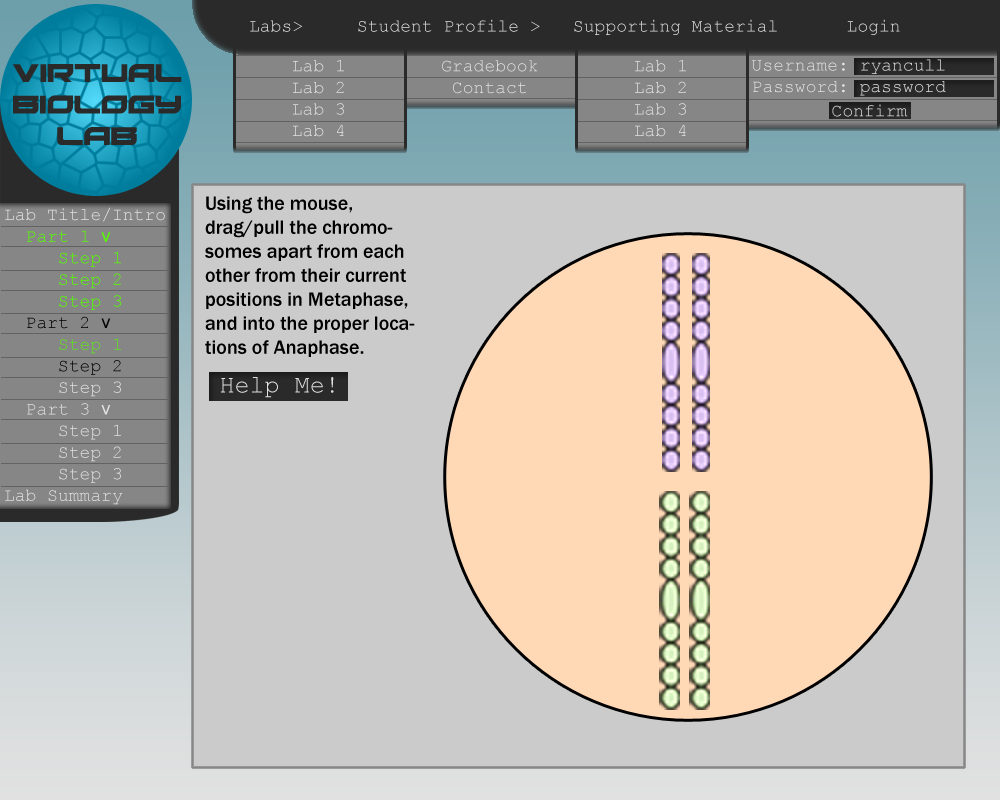
<style>
.page{position:relative;width:1000px;height:800px;background:#cbcbcb}
.page>*{position:absolute;margin:0}
.t1{font:18px "CourierNewPSMT";color:#e1e1e1}
.t2{font:20px "FranklinGothic-Medium";color:#000000}
.t3{font:18px "CourierNewPSMT";color:#54ff00}
.t4{font:18px "ArialMT";color:#54ff00}
.t5{font:18px "CourierNewPSMT";color:#000000}
.t6{font:18px "ArialMT";color:#000000}
.t7{font:18px "CourierNewPSMT";color:#61e122}
.t8{font:18px "ArialMT";color:#e1e1e1}
.t9{font:25px "CourierNewPSMT";color:#e1e1e1}
</style>
<div class="page">
<p class="t1" style="left:250px;top:19px;width:650px;height:16px">Labs&gt;  Student Profile &gt; Supporting Material    Login</p>
<p class="t1" style="left:293px;top:60px;width:51px;height:77px;text-align:center">Lab 1<br>Lab 2<br>Lab 3<br>Lab 4</p>
<p class="t1" style="left:442px;top:60px;width:96px;height:34px;text-align:center">Gradebook<br>Contact</p>
<p class="t1" style="left:635px;top:60px;width:51px;height:77px;text-align:center">Lab 1<br>Lab 2<br>Lab 3<br>Lab 4</p>
<p class="t1" style="left:752px;top:59px;width:194px;height:37px;text-align:center">Username: ryancull<br>Password: password</p>
<p class="t1" style="left:832px;top:104px;width:76px;height:13px">Confirm</p>
<p class="t2" style="left:205px;top:196px;width:210px;height:161px">Using the mouse, drag/pull the chromosomes apart from each other from their current positions in Metaphase, and into the proper locations of Anaphase.</p>
<p class="t1" style="left:5px;top:207px;width:160px;height:298px">Lab Title/Intro<br>  <span class="t3">Part 1 </span><span class="t4">v<br></span><span class="t3">     Step 1<br>     Step 2<br>     Step 3<br>  </span><span class="t5">Part 2 </span><span class="t6">v<br>     </span><span class="t7">Step 1<br>     </span><span class="t5">Step 2<br></span>     Step 3<br>  Part 3 <span class="t8">v<br></span>     Step 1<br>     Step 2<br>     Step 3<br>Lab Summary</p>
<p class="t9" style="left:220px;top:377px;width:114px;height:21px">Help Me!</p>
</div>
